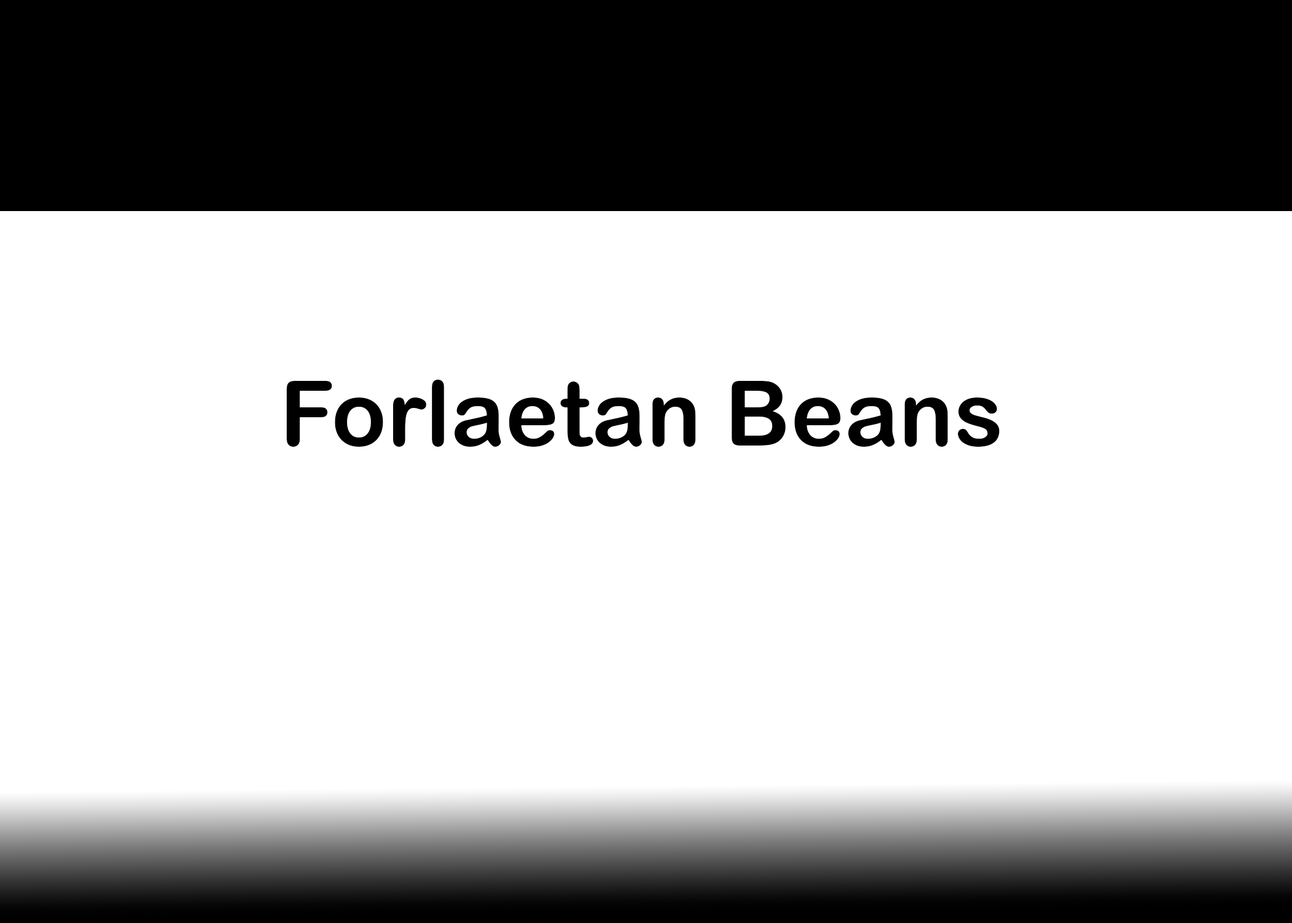
<style>
.page{position:relative;width:1292px;height:923px;background:#ffffff}
.page>*{position:absolute;margin:0}
.t1{font:90.6px "ArialRoundedMTBold";letter-spacing:0.005em;color:#000000}
</style>
<div class="page">
<p class="t1" style="left:287px;top:380px;width:713px;height:67px">Forlaetan Beans</p>
</div>
